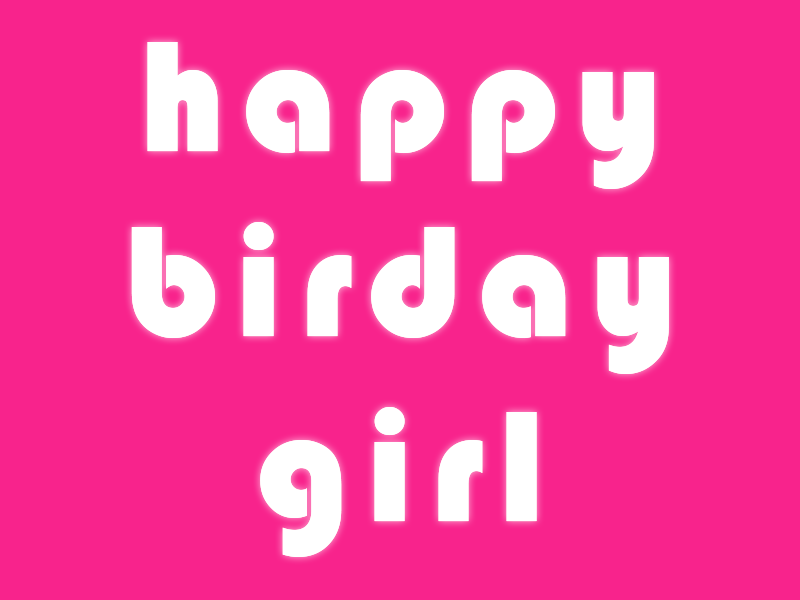
<style>
.page{position:relative;width:800px;height:600px;background:#f8238c}
.page>*{position:absolute;margin:0}
.t1{font:162.9px/162.9px "Bauhaus93";letter-spacing:0.1em;color:#ffffff}
</style>
<div class="page">
<p class="t1" style="left:131px;top:42px;width:538px;height:515px;text-align:center">happy<br>birday<br>girl</p>
<p class="t1" style="left:131px;top:42px;width:538px;height:515px;text-align:center">happy<br>birday<br>girl</p>
</div>
